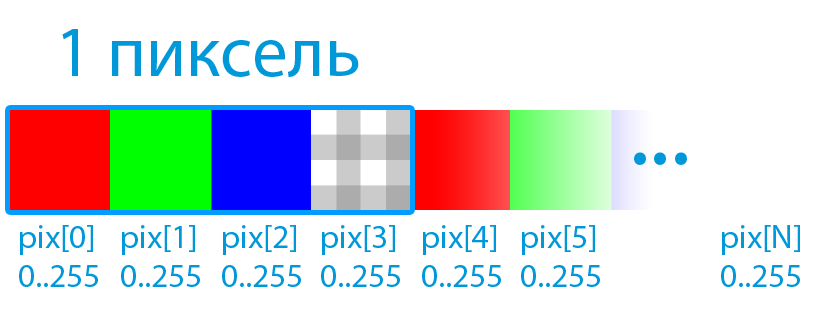
<style>
.page{position:relative;width:820px;height:320px;background:#ffffff}
.page>*{position:absolute;margin:0}
.t1{font:72px "MyriadPro-Regular";color:#0098d8}
.t2{font:100px "MyriadPro-Regular";color:#0098d8}
.t3{font:33px "MyriadPro-Regular";color:#0098d8}
</style>
<div class="page">
<p class="t1" style="left:62px;top:29px;width:297px;height:48px">1 пиксель</p>
<p class="t2" style="left:634px;top:152px;width:53px;height:13px">...</p>
<p class="t3" style="left:19px;top:225px;width:79px;height:62px">pix[0]<br>0..255</p>
<p class="t3" style="left:121px;top:225px;width:79px;height:62px">pix[1]<br>0..255</p>
<p class="t3" style="left:222px;top:225px;width:79px;height:62px">pix[2]<br>0..255</p>
<p class="t3" style="left:321px;top:225px;width:79px;height:62px">pix[3]<br>0..255</p>
<p class="t3" style="left:422px;top:225px;width:79px;height:62px">pix[4]<br>0..255</p>
<p class="t3" style="left:521px;top:225px;width:79px;height:62px">pix[5]<br>0..255</p>
<p class="t3" style="left:721px;top:225px;width:79px;height:62px">pix[N]<br>0..255</p>
</div>
